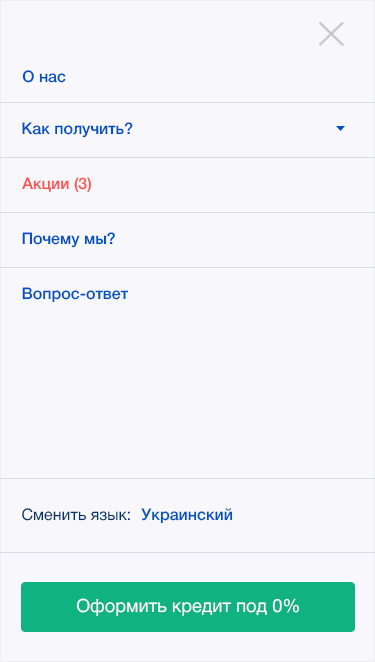
<style>
.page{position:relative;width:375px;height:662px;background:#f8f7fc}
.page>*{position:absolute;margin:0}
.t1{font:16px "HelveticaNeueCyr-Medium";color:#0054c1}
.t2{font:16px "HelveticaNeueCyr-Medium";color:#ff524f}
.t3{font:16px "HelveticaNeueCyr-Roman";color:#003568}
.t4{font:18.3px "HelveticaNeueCyr-Roman";color:#ffffff}
</style>
<div class="page">
<p class="t1" style="left:22px;top:70px;width:44px;height:13px">О нас</p>
<p class="t1" style="left:22px;top:122px;width:111px;height:16px">Как получить?</p>
<p class="t2" style="left:22px;top:177px;width:69px;height:16px">Акции (3)</p>
<p class="t1" style="left:22px;top:232px;width:93px;height:16px">Почему мы?</p>
<p class="t1" style="left:22px;top:287px;width:107px;height:16px">Вопрос-ответ</p>
<p class="t3" style="left:22px;top:508px;width:108px;height:13px">Сменить язык:</p>
<p class="t1" style="left:141px;top:508px;width:92px;height:16px">Украинский</p>
<p class="t4" style="left:76px;top:598px;width:224px;height:18px">Оформить кредит под 0%</p>
</div>
